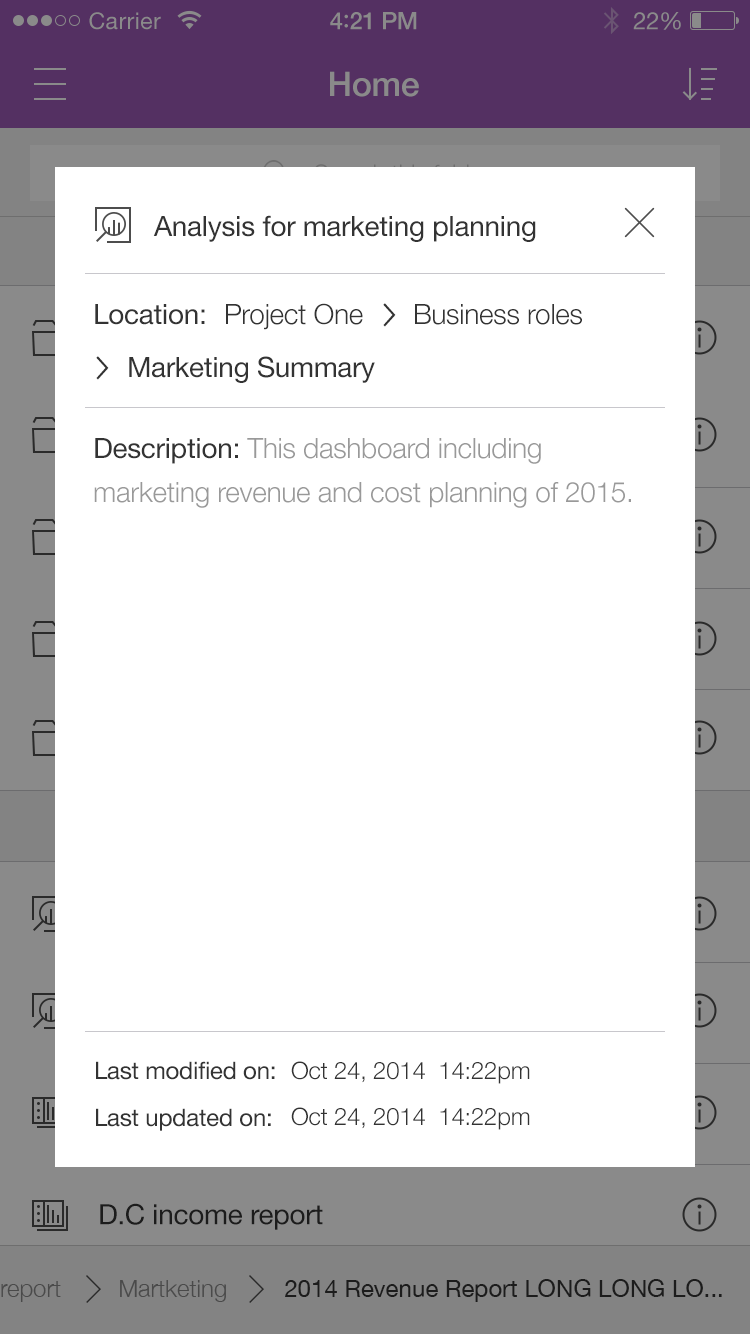
<style>
.page{position:relative;width:750px;height:1334px;background:#ffffff}
.page>*{position:absolute;margin:0}
.t1{font:23px "HelveticaNeue";letter-spacing:0.02em;color:#8a8a8a}
.t2{font:24px "HelveticaNeue-Medium";letter-spacing:-0.02em;color:#8a8a8a}
.t3{font:26px "Avenir-Medium";letter-spacing:-0.02em;color:#8a8a8a}
.t4{font:24px "HelveticaNeue";letter-spacing:-0.02em;color:#8a8a8a}
.t5{font:34px "HelveticaNeue-Medium";letter-spacing:-0.01em;color:#8a8a8a}
.t6{font:28px "HelveticaNeue";letter-spacing:-0.01em;color:#333333}
.t7{font:28px "HelveticaNeue-Light";letter-spacing:-0.01em;color:#333333}
.t8{font:30px "EuphemiaUCAS";letter-spacing:-0.01em;color:#333333}
.t9{font:28px/44px "HelveticaNeue-Light";letter-spacing:-0.01em;color:#999999}
.t10{font:28px/44px "HelveticaNeue";letter-spacing:-0.01em;color:#333333}
.t11{font:24px "HelveticaNeue";letter-spacing:-0.01em;color:#333333}
.t12{font:24px "HelveticaNeue-Light";letter-spacing:-0.01em;color:#333333}
.t13{font:24px "HelveticaNeue-Light";color:#333333}
.t14{font:24px "HelveticaNeue";color:#333333}
</style>
<div class="page">
<p class="t1" style="left:89px;top:12px;width:72px;height:18px">Carrier</p>
<p class="t2" style="left:330px;top:12px;width:87px;height:18px">4<span class="t3">:</span>21 PM</p>
<p class="t4" style="left:633px;top:12px;width:48px;height:18px">22%</p>
<p class="t5" style="left:330px;top:71px;width:89px;height:26px">Home</p>
<p class="t6" style="left:153px;top:215px;width:383px;height:27px">Analysis for marketing planning</p>
<p class="t6" style="left:95px;top:304px;width:110px;height:21px">Location:</p>
<p class="t7" style="left:226px;top:303px;width:137px;height:27px">Project One</p>
<p class="t8" style="left:383px;top:303px;width:13px;height:24px">&gt;</p>
<p class="t7" style="left:415px;top:304px;width:167px;height:21px">Business roles</p>
<p class="t8" style="left:96px;top:356px;width:13px;height:24px">&gt;</p>
<p class="t6" style="left:129px;top:356px;width:246px;height:27px">Marketing Summary</p>
<p class="t9" style="left:94px;top:438px;width:537px;height:70px"><span class="t10">Description: </span>This dashboard including <br>marketing revenue and cost planning of 2015.</p>
<p class="t11" style="left:96px;top:1061px;width:179px;height:19px">Last modified on:</p>
<p class="t12" style="left:291px;top:1061px;width:239px;height:23px">Oct 24, 2014  14:22pm</p>
<p class="t11" style="left:96px;top:1108px;width:175px;height:23px">Last updated on:</p>
<p class="t12" style="left:291px;top:1107px;width:239px;height:23px">Oct 24, 2014  14:22pm</p>
<p class="t6" style="left:100px;top:1203px;width:223px;height:27px">D.C income report</p>
<p class="t13" style="left:120px;top:1280px;width:106px;height:22px;opacity:0.65">Martketing</p>
<p class="t14" style="left:285px;top:1279px;width:437px;height:23px">2014 Revenue Report LONG LONG LO...</p>
</div>
